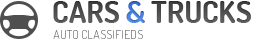
<style>
.page{position:relative;width:270px;height:45px;background:#ffffff}
.page>*{position:absolute;margin:0}
.t1{font:30px "Dosis-Bold";color:#545454;text-transform:uppercase}
.t2{font:30px "Dosis-Bold";color:#535353;text-transform:uppercase}
.t3{font:30px "Dosis-Bold";color:#4885e9;text-transform:uppercase}
</style>
<div class="page">
<p class="t1" style="left:53px;top:1px;width:198px;height:22px"><span class="t2">CARS</span><span class="t3"> &amp; </span>TRUCKS</p>
</div>
